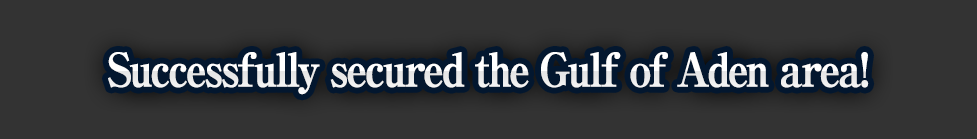
<style>
.page{position:relative;width:977px;height:139px;background:#333333}
.page>*{position:absolute;margin:0}
.t1{font:46px "RyuminPro-ExBold";letter-spacing:-0.08em;color:#ffffff;font-weight:bold;scale:0.9 1}
</style>
<div class="page">
<p class="t1" style="left:108px;top:52px;width:761px;height:43px">Successfully secured the Gulf of Aden area!</p>
</div>
